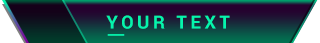
<style>
.page{position:relative;width:320px;height:43px}
.page>*{position:absolute;margin:0}
.t1{font:18px "Roboto-Bold";letter-spacing:0.2em;color:#05f5ad;text-transform:uppercase}
</style>
<div class="page">
<p class="t1" style="left:106px;top:15px;width:124px;height:14px">Your text</p>
</div>
